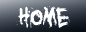
<style>
.page{position:relative;width:86px;height:32px}
.page>*{position:absolute;margin:0}
.t1{font:37.3px "YouMurdererBB";color:#ffffff;scale:0.84 1}
</style>
<div class="page">
<p class="t1" style="left:16px;top:6px;width:54px;height:23px">Home</p>
</div>
